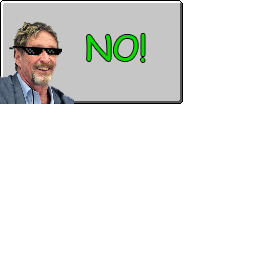
<style>
.page{position:relative;width:256px;height:256px;background:#ffffff}
.page>*{position:absolute;margin:0}
.t1{font:34.3px "ComicSansMS";letter-spacing:-0.02em;color:#0fd700}
</style>
<div class="page">
<p class="t1" style="left:87px;top:34px;width:58px;height:28px">NO!</p>
</div>
